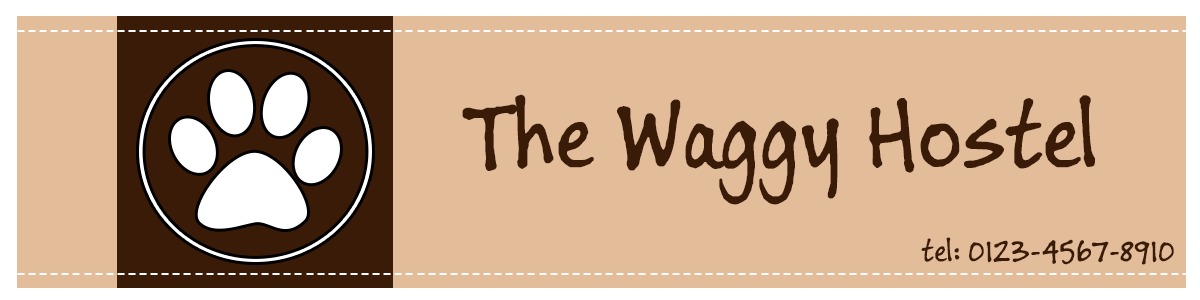
<style>
.page{position:relative;width:1200px;height:300px;background:#e3bc9a}
.page>*{position:absolute;margin:0}
.t1{font:33.3px "Modern-Regular";color:#ffffff}
.t2{font:33.3px "Modern-Regular";color:#270d48}
.t3{font:100px "BuxtonSketch";color:#3a1b08}
.t4{font:33.3px "BuxtonSketch";color:#3a1b08}
</style>
<div class="page">
<p class="t1" style="left:17px;top:30px;width:1173px;height:2px">----------------------------------------------------------------------------------------------------------<span class="t2">-</span></p>
<p class="t3" style="left:462px;top:94px;width:633px;height:111px">The Waggy Hostel</p>
<p class="t4" style="left:921px;top:237px;width:253px;height:28px">tel: 0123-4567-8910</p>
<p class="t1" style="left:17px;top:273px;width:1173px;height:2px">----------------------------------------------------------------------------------------------------------<span class="t2">-</span></p>
</div>
